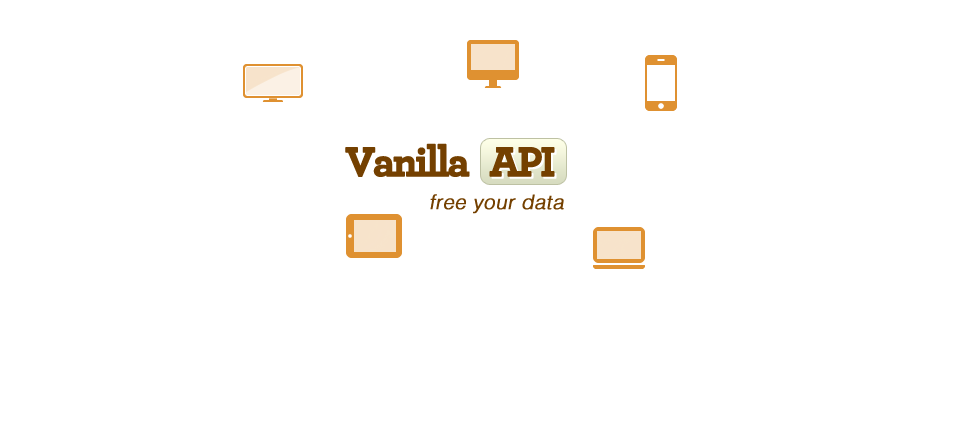
<style>
.page{position:relative;width:960px;height:422px;background:#ffffff}
.page>*{position:absolute;margin:0}
.t1{font:43px "Archer-Bold";letter-spacing:-0.075em;color:#744000;font-weight:bold}
.t2{font:43px "Archer-Bold";letter-spacing:-0.075em;font-weight:bold}
.t3{font:20px "Helvetica-Light";letter-spacing:0.01em;color:#744000;font-weight:bold;font-style:italic}
</style>
<div class="page">
<p class="t1" style="left:345px;top:143px;width:210px;height:34px">Vanilla   API</p>
<p class="t2" style="left:347px;top:145px;width:210px;height:34px">Vanilla   API</p>
<p class="t3" style="left:430px;top:194px;width:134px;height:20px">free your data</p>
</div>
